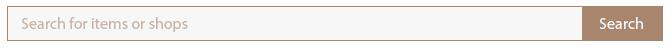
<style>
.page{position:relative;width:672px;height:48px;background:#f8f7f7}
.page>*{position:absolute;margin:0}
.t1{font:12px "MyriadPro-Regular";color:#c8b3a5}
.t2{font:12px "MyriadPro-Regular";color:#f8f7f7}
</style>
<div class="page">
<p class="t1" style="left:21px;top:17px;width:167px;height:15px">Search for items or shops</p>
<p class="t2" style="left:599px;top:17px;width:44px;height:12px">Search</p>
</div>
